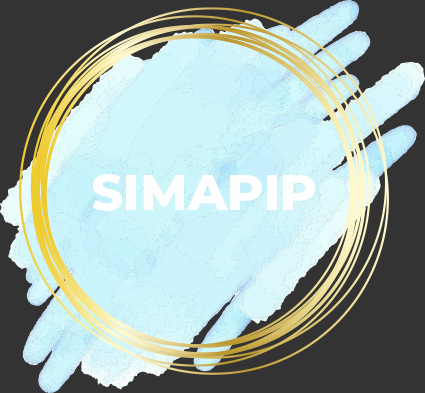
<style>
.page{position:relative;width:425px;height:393px;background:#333333}
.page>*{position:absolute;margin:0}
.t1{font:50px "Montserrat-ExtraBold";color:#fefefe}
</style>
<div class="page">
<p class="t1" style="left:92px;top:174px;width:223px;height:37px">SIMAPIP</p>
</div>
